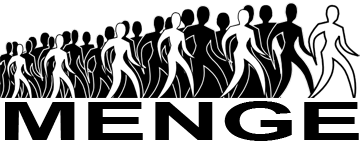
<style>
.page{position:relative;width:363px;height:143px;background:#ffffff}
.page>*{position:absolute;margin:0}
.t1{font:53.2px "Arial-BoldMT";color:#000000;scale:1.88 1}
</style>
<div class="page">
<p class="t1" style="left:5px;top:101px;width:354px;height:40px">MENGE</p>
</div>
